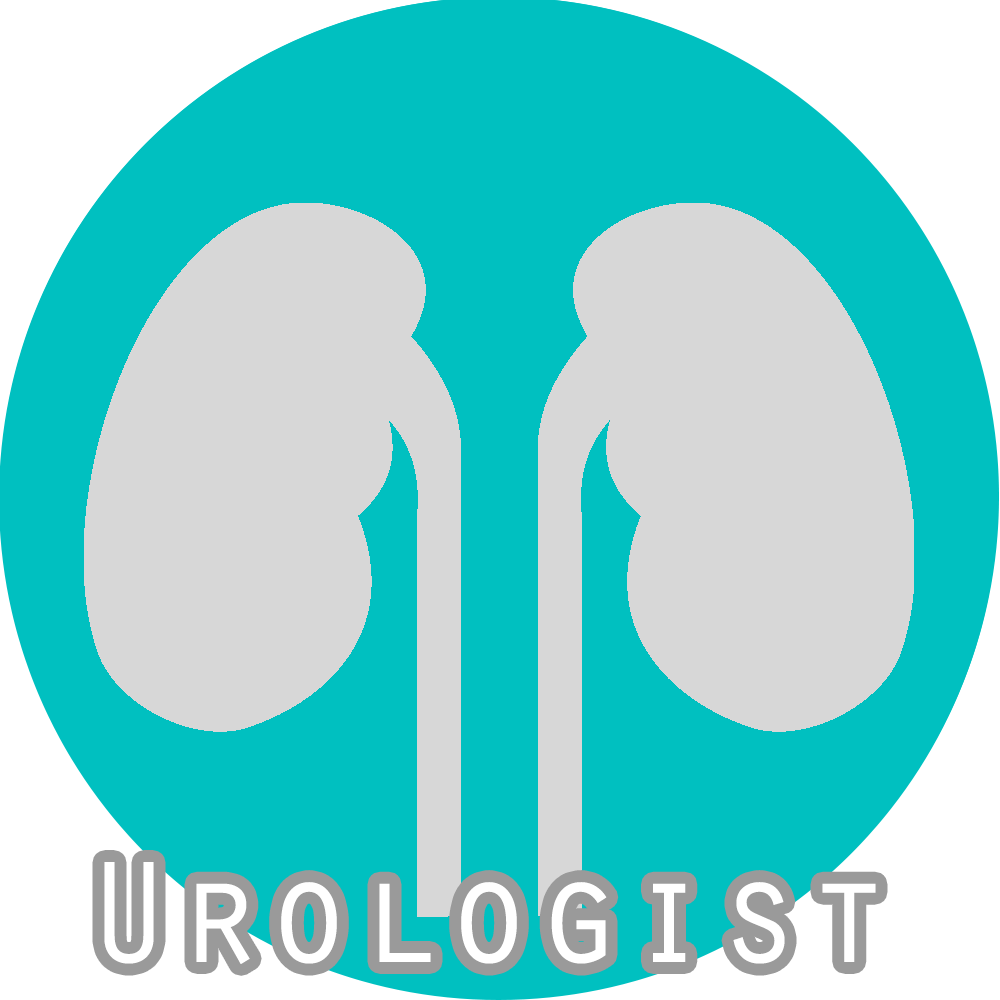
<style>
.page{position:relative;width:1000px;height:1000px;background:#00c0c0}
.page>*{position:absolute;margin:0}
.t1{font:150px "OratorStd";color:#ffffff}
</style>
<div class="page">
<p class="t1" style="left:104px;top:862px;width:772px;height:102px">Urologist</p>
</div>
